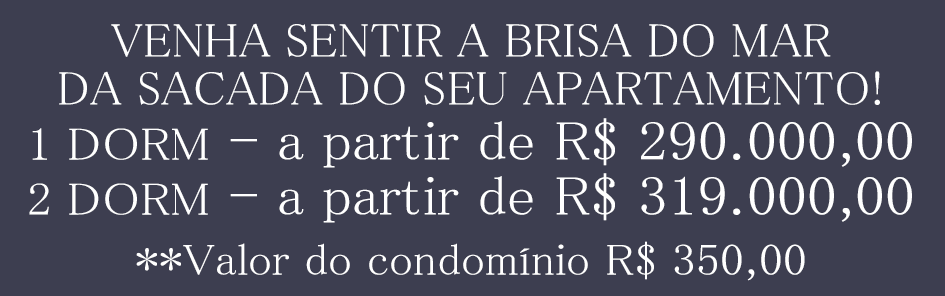
<style>
.page{position:relative;width:945px;height:296px;background:#3d3e50}
.page>*{position:absolute;margin:0}
.t1{font:48px/48px "MS-PMincho";color:#ffffff;text-transform:uppercase}
.t2{font:46px/55px "MS-PMincho";color:#ffffff;text-transform:uppercase;scale:1.09 1}
.t3{font:55.2px/55px "MS-PMincho";color:#ffffff;scale:1.09 1}
.t4{font:44.2px/60px "MS-PMincho";color:#ffffff;scale:1.09 1}
</style>
<div class="page">
<p class="t1" style="left:29px;top:23px;width:883px;height:258px;text-align:center">Venha sentir a brisa do mar <br>da sacada do seu apartamento! <br><span class="t2">1 dorm</span><span class="t3"> - a partir de R$ 290.000,00 <br></span><span class="t2">2 dorm</span><span class="t3"> - a partir de R$ 319.000,00 <br></span><span class="t4">**Valor do condomínio R$ 350,00</span></p>
</div>
